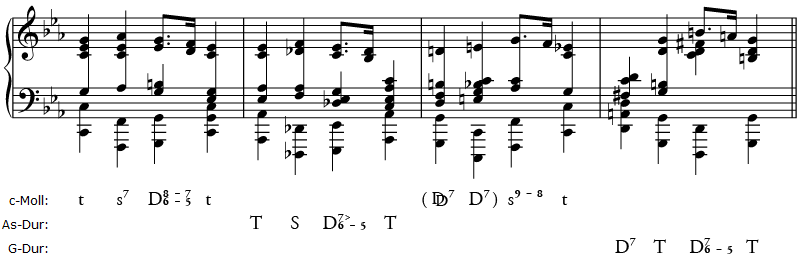
<style>
.page{position:relative;width:800px;height:260px;background:#ffffff}
.page>*{position:absolute;margin:0}
.t1{font:18.7px/24px "Analysia";color:#000000}
</style>
<div class="page">
<p class="t1" style="left:78px;top:190px;width:681px;height:64px">t       sÏª    DØÐª ˜™ ª×Ïª   t                                             ( æçÏª   DÏ  )  sÑª ˜ª Ðª    t<br>                                     T      S     DØÏªê ™ ª×ª    T<br>                                                                                                                   DÏª    T     DØÏª ™ª ×ª   T</p>
</div>
